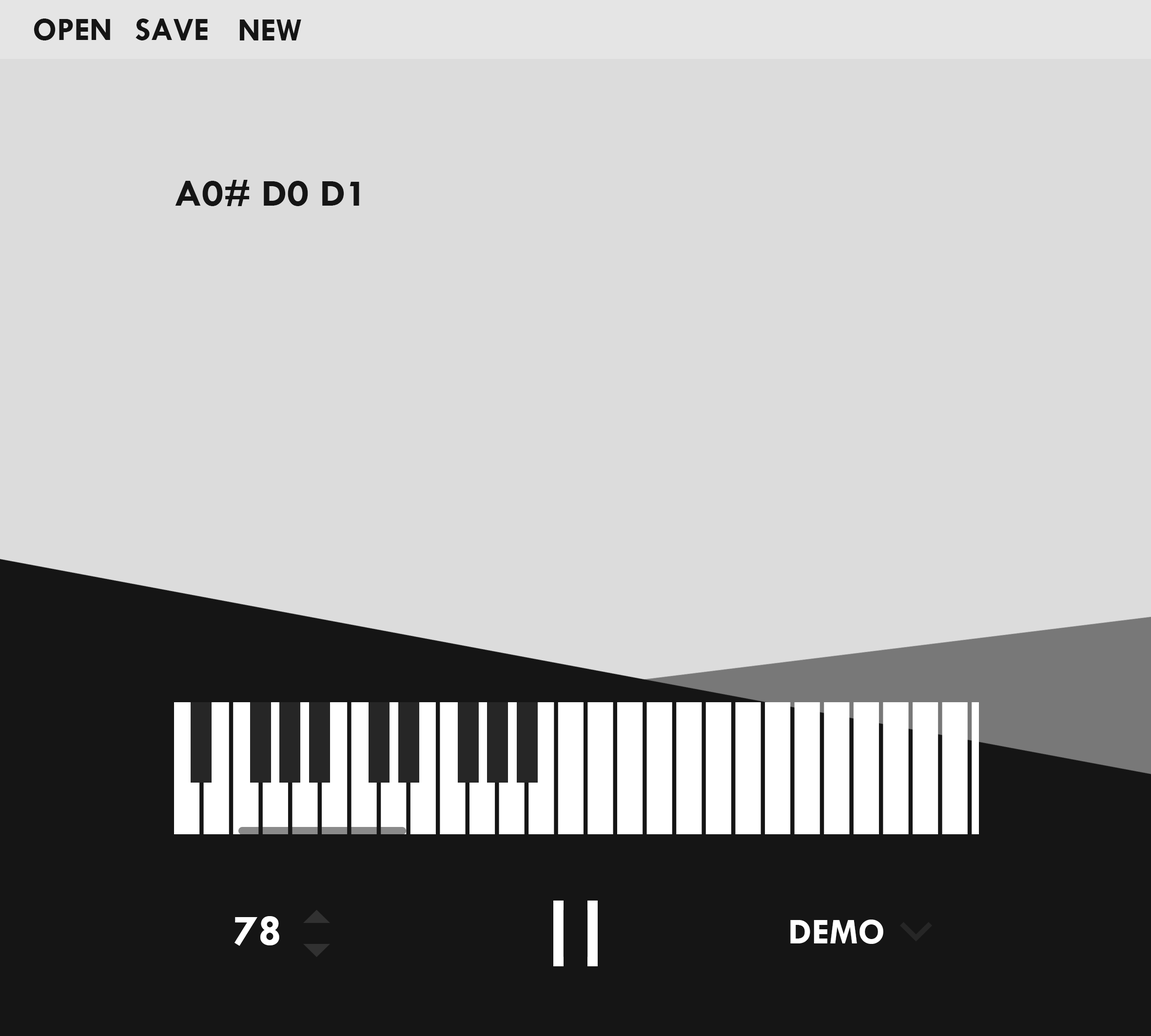
<style>
.page{position:relative;width:1151px;height:1036px;background:#dcdcdc}
.page>*{position:absolute;margin:0}
.t1{font:32.5px "TwCenMT-Bold";color:#151515}
.t2{font:38px "TwCenMT-Bold";color:#151515;scale:1.07 1}
.t3{font:44.7px "TwCenMT-Bold";color:#ffffff}
.t4{font:36.6px "TwCenMT-Bold";color:#ffffff}
</style>
<div class="page">
<p class="t1" style="left:34px;top:19px;width:76px;height:21px">OPEN</p>
<p class="t1" style="left:135px;top:19px;width:73px;height:21px">SAVE</p>
<p class="t1" style="left:239px;top:19px;width:62px;height:21px">NEW</p>
<p class="t2" style="left:175px;top:180px;width:184px;height:26px">A0# D0 D1</p>
<p class="t3" style="left:234px;top:916px;width:45px;height:30px">78</p>
<p class="t4" style="left:790px;top:920px;width:93px;height:24px">DEMO</p>
</div>
